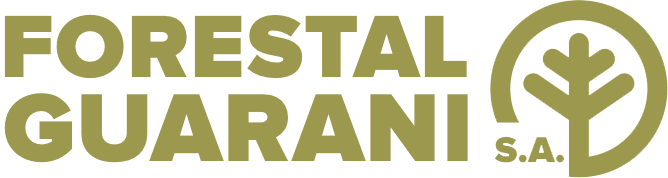
<style>
.page{position:relative;width:668px;height:178px;background:#ffffff}
.page>*{position:absolute;margin:0}
.t1{font:91.7px "ProximaNovaSW01SC-Black";letter-spacing:0.028em;color:#9c984d}
.t2{font:100px "ProximaNovaSW01SC-Black";letter-spacing:0.023em;color:#9c984d}
</style>
<div class="page">
<p class="t1" style="left:4px;top:14px;width:463px;height:65px">FORESTAL</p>
<p class="t2" style="left:4px;top:93px;width:464px;height:70px">GUARANI</p>
</div>
